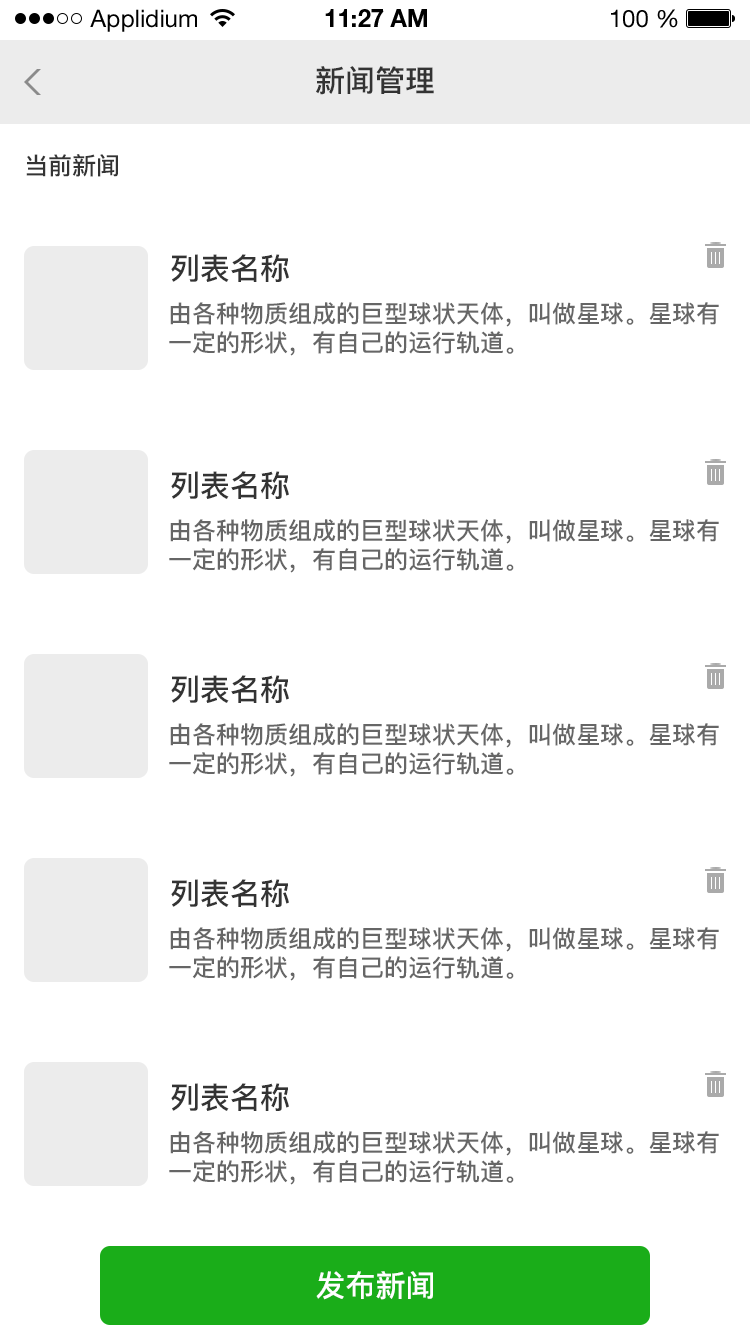
<style>
.page{position:relative;width:750px;height:1334px;background:#ffffff}
.page>*{position:absolute;margin:0}
.t1{font:24px "HelveticaNeueLTStd-Roman";color:#000000}
.t2{font:24px "HelveticaNeueLTStd-Bd";color:#000000}
.t3{font:30px "PingFang-SC-Bold";color:#333333}
.t4{font:24px "PingFang-SC-Bold";color:#333333}
.t5{font:24px "PingFang-SC-Bold";color:#666666}
.t6{font:30px "PingFang-SC-Bold";color:#ffffff}
</style>
<div class="page">
<p class="t1" style="left:90px;top:9px;width:107px;height:23px">Applidium</p>
<p class="t2" style="left:325px;top:9px;width:102px;height:18px">11:27 AM</p>
<p class="t1" style="left:611px;top:9px;width:67px;height:19px">100 %</p>
<p class="t3" style="left:316px;top:66px;width:118px;height:29px">新闻管理</p>
<p class="t4" style="left:26px;top:154px;width:92px;height:23px">当前新闻</p>
<p class="t3" style="left:171px;top:254px;width:118px;height:28px">列表名称</p>
<p class="t5" style="left:169px;top:302px;width:550px;height:54px">由各种物质组成的巨型球状天体，叫做星球。星球有<br>一定的形状，有自己的运行轨道。</p>
<p class="t3" style="left:171px;top:471px;width:118px;height:28px">列表名称</p>
<p class="t5" style="left:169px;top:519px;width:550px;height:54px">由各种物质组成的巨型球状天体，叫做星球。星球有<br>一定的形状，有自己的运行轨道。</p>
<p class="t3" style="left:171px;top:675px;width:118px;height:28px">列表名称</p>
<p class="t5" style="left:169px;top:723px;width:550px;height:54px">由各种物质组成的巨型球状天体，叫做星球。星球有<br>一定的形状，有自己的运行轨道。</p>
<p class="t3" style="left:171px;top:879px;width:118px;height:28px">列表名称</p>
<p class="t5" style="left:169px;top:927px;width:550px;height:54px">由各种物质组成的巨型球状天体，叫做星球。星球有<br>一定的形状，有自己的运行轨道。</p>
<p class="t3" style="left:171px;top:1083px;width:118px;height:28px">列表名称</p>
<p class="t5" style="left:169px;top:1131px;width:550px;height:54px">由各种物质组成的巨型球状天体，叫做星球。星球有<br>一定的形状，有自己的运行轨道。</p>
<p class="t6" style="left:316px;top:1271px;width:117px;height:29px">发布新闻</p>
</div>
